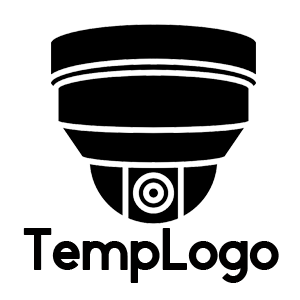
<style>
.page{position:relative;width:300px;height:300px;background:#ffffff}
.page>*{position:absolute;margin:0}
.t1{font:75px "perfectlyamicable";color:#010000}
</style>
<div class="page">
<p class="t1" style="left:23px;top:228px;width:256px;height:55px">TempLogo</p>
</div>
